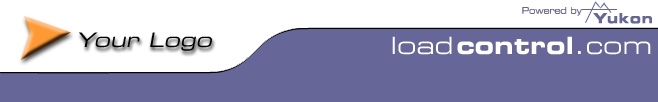
<style>
.page{position:relative;width:658px;height:102px;background:#666699}
.page>*{position:absolute;margin:0}
.t1{font:20px "Eurostile-ExtendedTwo";color:#000000;font-style:italic}
.t2{font:24px "Eurostile-ExtendedTwo";color:#ffffff}
.t3{font:24px "Eurostile-BoldExtendedTwo";color:#ffffff}
</style>
<div class="page">
<p class="t1" style="left:79px;top:32px;width:133px;height:19px">Your Logo</p>
<p class="t2" style="left:392px;top:36px;width:60px;height:19px">load</p>
<p class="t3" style="left:457px;top:36px;width:115px;height:19px">control</p>
<p class="t2" style="left:578px;top:41px;width:73px;height:14px">.com</p>
</div>
